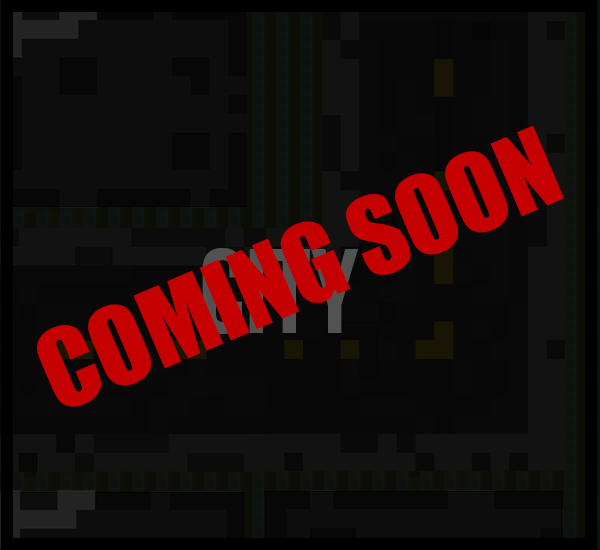
<style>
.page{position:relative;width:600px;height:550px}
.page>*{position:absolute;margin:0}
.t1{font:100px "Impact";color:#c40000}
</style>
<div class="page">
<p class="t1" style="left:37px;top:125px;width:527px;height:282px;rotate:-23deg">COMING SOON</p>
</div>
